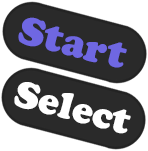
<style>
.page{position:relative;width:148px;height:151px;background:#2a2a2a}
.page>*{position:absolute;margin:0}
.t1{font:41px "CooperBlack";color:#6f67e2}
.t2{font:38.9px "CooperBlack";color:#ffffff}
</style>
<div class="page">
<p class="t1" style="left:18px;top:17px;width:109px;height:51px;rotate:14deg">Start</p>
<p class="t2" style="left:14px;top:82px;width:117px;height:52px;rotate:14deg">Select</p>
</div>
